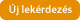
<style>
.page{position:relative;width:80px;height:20px;background:#e68d00}
.page>*{position:absolute;margin:0}
.t1{font:11px "MyriadPro-Semibold";color:#ffffff}
</style>
<div class="page">
<p class="t1" style="left:9px;top:4px;width:63px;height:12px">Új lekérdezés</p>
</div>
